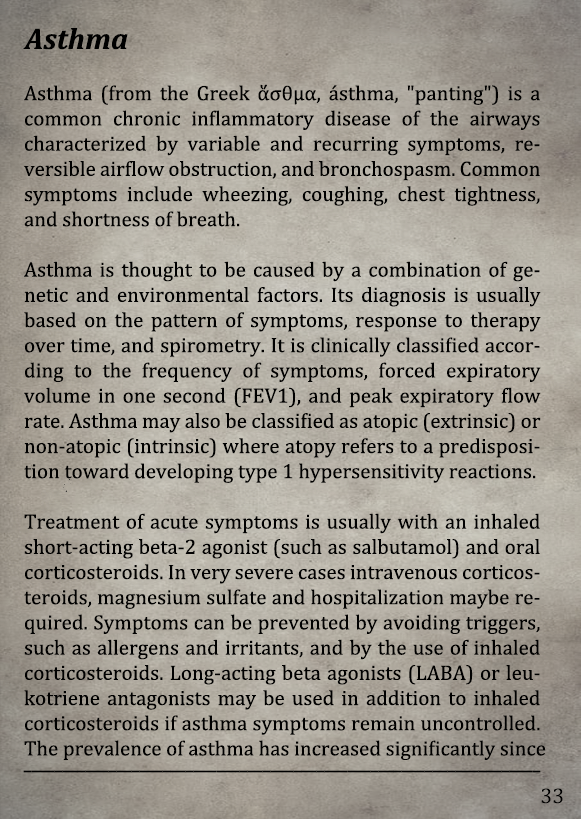
<style>
.page{position:relative;width:581px;height:819px}
.page>*{position:absolute;margin:0}
.t1{font:30px "Cambria-BoldItalic";color:#000000}
.t2{font:21px "Cambria";color:#000000}
.t3{font:21px "Arimo";color:#000000;scale:0.66 1}
.t4{font:21.5px "Cambria";color:#000000}
</style>
<div class="page">
<p class="t1" style="left:23px;top:28px;width:105px;height:22px">Asthma</p>
<p class="t2" style="left:24px;top:84px;width:522px;height:676px;text-align:justify">Asthma (from the Greek ἅσθμα, ásthma, "panting") is a common chronic inflammatory disease of the airways  characterized by variable and recurring symptoms, re-<br>versible airflow obstruction, and bronchospasm. Common symptoms include wheezing, coughing, chest tightness, and shortness of breath.<br><br>Asthma is thought to be caused by a combination of genetic and environmental factors. Its diagnosis is usually based on the pattern of symptoms, response to therapy over time, and spirometry. It is clinically classified according to the frequency of symptoms, forced expiratory volume in one second (FEV1), and peak expiratory flow rate. Asthma may also be classified as atopic (extrinsic) or non-atopic (intrinsic) where atopy refers to a predisposition toward developing type 1 hypersensitivity reactions. <br><br>Treatment of acute symptoms is usually with an inhaled short-acting beta-2 agonist (such as salbutamol) and oral corticosteroids. In very severe cases intravenous corticosteroids, magnesium sulfate and hospitalization maybe required. Symptoms can be prevented by avoiding triggers, such as allergens and irritants, and by the use of inhaled corticosteroids. Long-acting beta agonists (LABA) or leukotriene antagonists may be used in addition to inhaled corticosteroids if asthma symptoms remain uncontrolled. The prevalence of asthma has increased significantly since</p>
<p class="t3" style="left:23px;top:770px;width:518px;height:3px">___________________________________________________________________</p>
<p class="t4" style="left:541px;top:788px;width:22px;height:16px">33</p>
</div>
